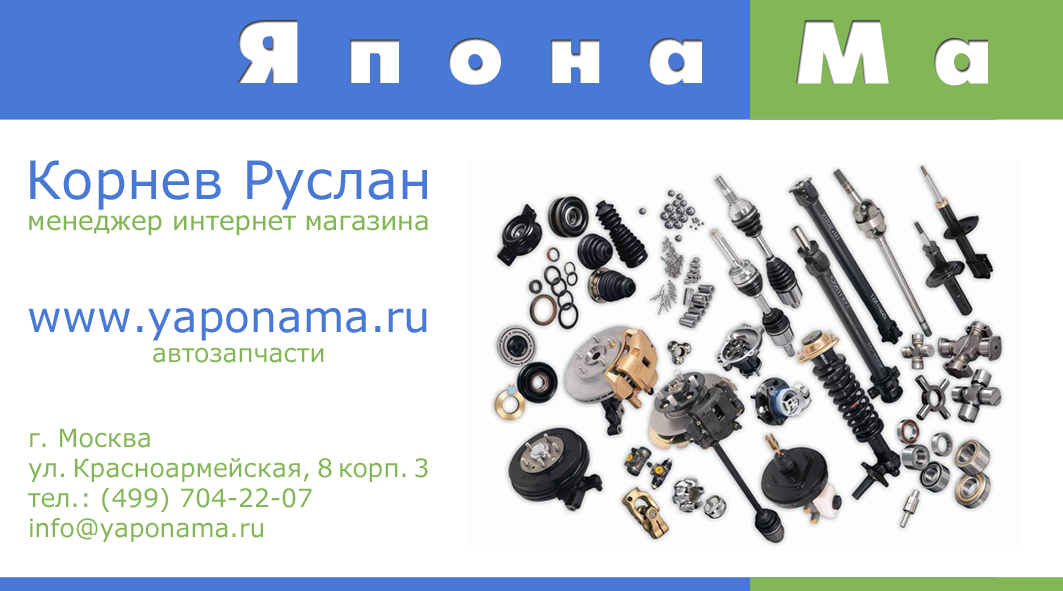
<style>
.page{position:relative;width:1063px;height:591px;background:#ffffff}
.page>*{position:absolute;margin:0}
.t1{font:89.9px "FuturaFuturisXC";color:#ffffff}
.t2{font:26.2px "Verdana";color:#83b656}
.t3{font:52.9px "Verdana";color:#4879d6}
.t4{font:26.2px "Verdana";letter-spacing:0.02em;color:#83b656}
.t5{font:42.5px "MSReferenceSansSerif";color:#4879d6}
.t6{font:25px "Verdana";color:#83b656}
</style>
<div class="page">
<p class="t1" style="left:237px;top:20px;width:465px;height:65px">Я  п  о  н  а</p>
<p class="t1" style="left:796px;top:20px;width:192px;height:66px">М  а</p>
<p class="t2" style="left:29px;top:160px;width:399px;height:76px;text-align:center"><span class="t3">Корнев Руслан<br></span><span class="t4">м</span>енеджер интернет магазина</p>
<p class="t5" style="left:28px;top:308px;width:399px;height:33px">www.yaponama.ru</p>
<p class="t6" style="left:153px;top:347px;width:171px;height:16px">автозапчасти</p>
<p class="t6" style="left:28px;top:428px;width:400px;height:114px">г. Москва<br>ул. Красноармейская, 8 корп. 3<br>тел.: (499) 704-22-07<br>info@yaponama.ru</p>
</div>
